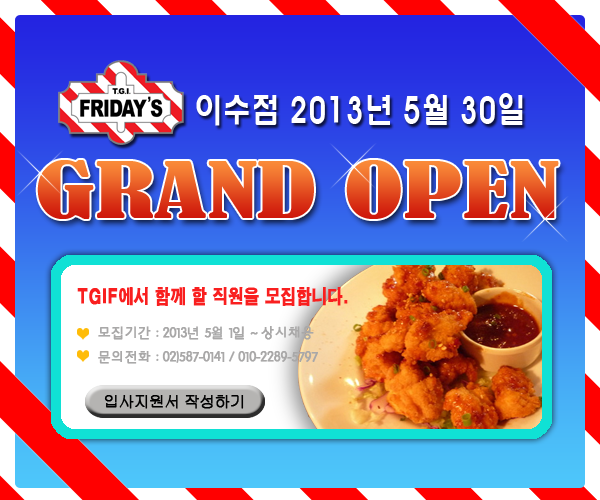
<style>
.page{position:relative;width:600px;height:500px}
.page>*{position:absolute;margin:0}
.t1{font:36px "HYwulB";color:#ffffff;scale:0.79 1}
.t2{font:71.5px "BernardMT-Condensed";scale:1.54 1}
.t3{font:19.2px "H2gtrE";color:#f91f1f;font-weight:bold;scale:0.79 1}
.t4{font:14px/24px "HYkanM";letter-spacing:-0.075em;color:#a9a8a8;font-weight:bold}
.t5{font:16px "Gulim";letter-spacing:-0.075em;color:#000000;font-weight:bold}
</style>
<div class="page">
<p class="t1" style="left:196px;top:93px;width:327px;height:33px">이수점 2013년 5월 30일</p>
<p class="t2" style="left:37px;top:160px;width:522px;height:59px">GRAND OPEN</p>
<p class="t3" style="left:77px;top:287px;width:271px;height:19px">TGIF에서 함께 할 직원을 모집합니다.</p>
<p class="t4" style="left:98px;top:326px;width:220px;height:38px">모집기간 : 2013년 5월 1일 ~ 상시채용<br>문의전화 : 02)587-0141 / 010-2289-5797</p>
<p class="t5" style="left:104px;top:395px;width:140px;height:14px">입사지원서 작성하기</p>
</div>
